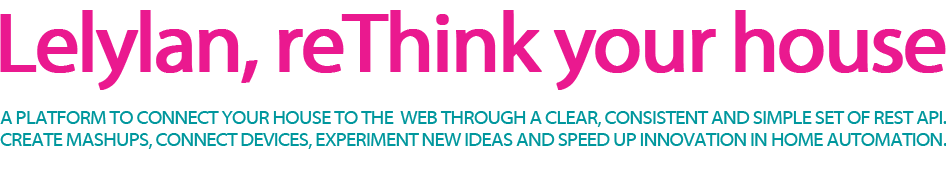
<style>
.page{position:relative;width:946px;height:170px;background:#ffffff}
.page>*{position:absolute;margin:0}
.t1{font:85.1px "MyriadWebPro";letter-spacing:-0.05em;color:#ea198f;font-weight:bold}
.t2{font:20.2px "MyriadWebPro";letter-spacing:-0.04em;color:#00979d}
.t3{font:20.1px "MyriadWebPro";letter-spacing:-0.04em;color:#00979d}
</style>
<div class="page">
<p class="t1" style="left:0px;top:10px;width:946px;height:80px">Lelylan, reThink your house</p>
<p class="t2" style="left:0px;top:111px;width:947px;height:16px">A PLATFORM TO CONNECT YOUR HOUSE TO THE  WEB THROUGH A CLEAR, CONSISTENT AND SIMPLE SET OF REST API.</p>
<p class="t3" style="left:0px;top:133px;width:947px;height:16px">CREATE MASHUPS, CONNECT DEVICES, EXPERIMENT NEW IDEAS AND SPEED UP INNOVATION IN HOME AUTOMATION.</p>
</div>
